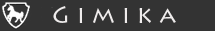
<style>
.page{position:relative;width:215px;height:31px;background:#333333}
.page>*{position:absolute;margin:0}
.t1{font:23.7px "LithosPro-Regular";color:#efecec}
</style>
<div class="page">
<p class="t1" style="left:53px;top:6px;width:123px;height:17px">G i m i k a</p>
</div>
